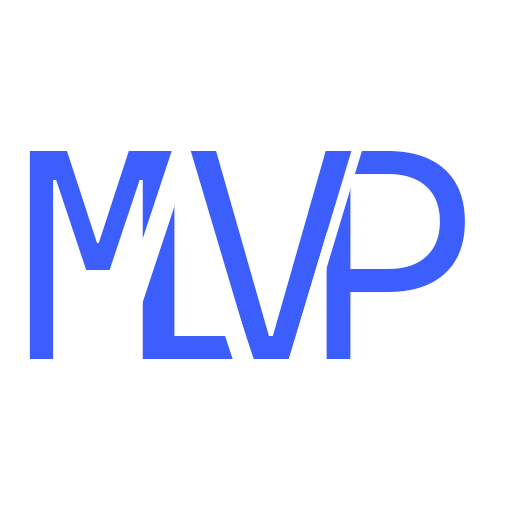
<style>
.page{position:relative;width:512px;height:512px;background:#ffffff}
.page>*{position:absolute;margin:0}
.t1{font:300px "CascadiaMono-SemiLight";color:#3b5efd}
</style>
<div class="page">
<p class="t1" style="left:29px;top:151px;width:137px;height:208px">M</p>
<p class="t1" style="left:150px;top:151px;width:136px;height:208px">L</p>
<p class="t1" style="left:190px;top:151px;width:162px;height:208px">V</p>
<p class="t1" style="left:326px;top:151px;width:139px;height:208px">P</p>
</div>
